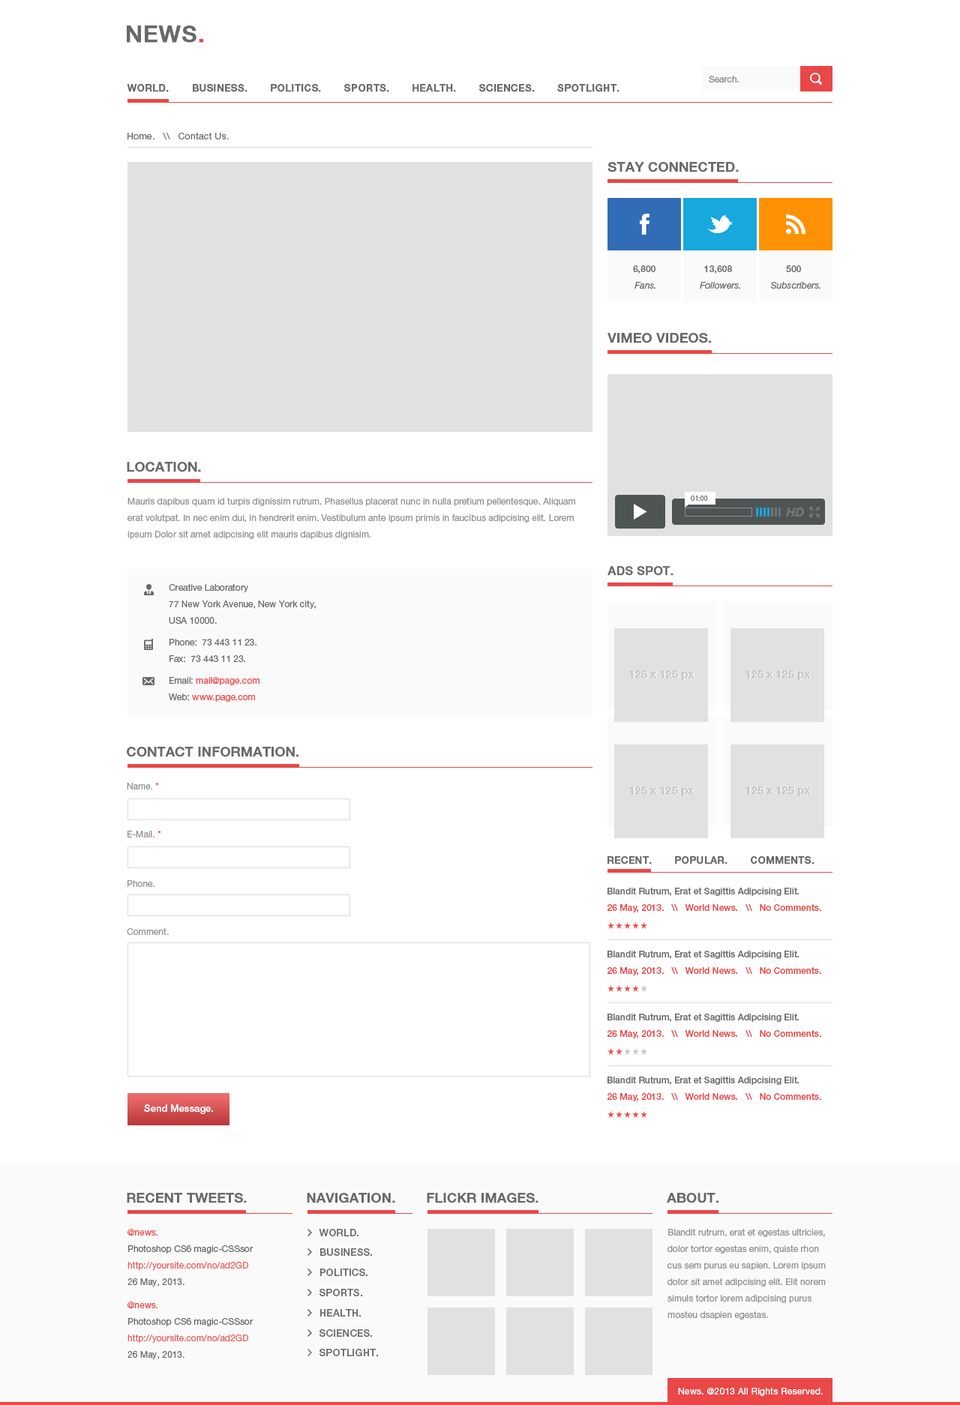
<style>
.page{position:relative;width:960px;height:1405px;background:#ffffff}
.page>*{position:absolute;margin:0}
.t1{font:22.5px "HelveticaNeueLTStd-Md";letter-spacing:0.025em;color:#696969;text-transform:uppercase;font-weight:bold}
.t2{font:22.5px "HelveticaNeueLTStd-Md";letter-spacing:0.025em;color:#ea4748;text-transform:uppercase;font-weight:bold}
.t3{font:9px "HelveticaNeueLTStd-Roman";color:#898989}
.t4{font:9.7px "HelveticaNeueLTStd-Md";letter-spacing:0.025em;color:#696969;text-transform:uppercase;font-weight:bold}
.t5{font:9px "HelveticaNeueLTStd-Roman";letter-spacing:0.025em;color:#696969}
.t6{font:13.5px "HelveticaNeueLTStd-Md";color:#696969;text-transform:uppercase;font-weight:bold}
.t7{font:9px/16.5px "HelveticaNeueLTStd-Md";color:#696969}
.t8{font:9px/16.5px "HelveticaNeueLTStd-It";color:#696969}
.t9{font:9px/16.5px "HelveticaNeueLTStd-Roman";color:#929292}
.t10{font:7.5px "MyriadPro-Regular";color:#696969}
.t11{font:12.3px "HelveticaNeueCyr-HeavyItalic";color:#6f7474}
.t12{font:12px "HelveticaNeueLTStd-Md";color:#696969;text-transform:uppercase;font-weight:bold}
.t13{font:9px/16.5px "HelveticaNeueLTStd-Roman";color:#696969}
.t14{font:9px/16.5px "HelveticaNeueLTStd-Roman";color:#ea4748}
.t15{font:10.5px "HelveticaNeueLTStd-Md";color:#d7d7d7;font-weight:bold}
.t16{font:9px "HelveticaNeueLTStd-Roman";color:#929292}
.t17{font:9px "HelveticaNeueLTStd-Roman";color:#ea4748}
.t18{font:9px "HelveticaNeueLTStd-Md";color:#696969}
.t19{font:9px "HelveticaNeueLTStd-Md";color:#ea4748}
.t20{font:9.7px "HelveticaNeueLTStd-Md";color:#ffffff}
.t21{font:9px/16.5px "HelveticaNeueLTStd-Roman";color:#ed5c5c}
.t22{font:9px/16.5px "HelveticaNeueLTStd-Roman";color:#686868}
.t23{font:9.7px/16.5px "HelveticaNeueLTStd-Md";letter-spacing:0.025em;color:#696969;text-transform:uppercase}
.t24{font:9px "HelveticaNeueLTStd-Roman";letter-spacing:0.025em;color:#ffffff}
</style>
<div class="page">
<p class="t1" style="left:127px;top:25px;width:76px;height:18px">News<span class="t2">.</span></p>
<p class="t3" style="left:709px;top:76px;width:30px;height:6px">Search.</p>
<p class="t4" style="left:127px;top:84px;width:492px;height:8px">World.       Business.       Politics.       Sports.       Health.       Sciences.       Spotlight.</p>
<p class="t5" style="left:127px;top:133px;width:102px;height:6px">Home.   \\   Contact Us.</p>
<p class="t6" style="left:607px;top:162px;width:132px;height:10px">Stay Connected.</p>
<p class="t7" style="left:633px;top:265px;width:22px;height:24px;text-align:center">6,800 <br><span class="t8">Fans.</span></p>
<p class="t8" style="left:700px;top:265px;width:40px;height:24px;text-align:center"><span class="t7">13,608  <br></span>Followers.</p>
<p class="t8" style="left:771px;top:265px;width:49px;height:24px;text-align:center"><span class="t7">500 <br> </span>Subscribers.</p>
<p class="t6" style="left:607px;top:333px;width:105px;height:10px">Vimeo Videos.</p>
<p class="t6" style="left:127px;top:462px;width:74px;height:10px">Location.</p>
<p class="t9" style="left:127px;top:498px;width:448px;height:41px">Mauris dapibus quam id turpis dignissim rutrum. Phasellus placerat nunc in nulla pretium pellentesque. Aliquam erat volutpat. In nec enim dui, in hendrerit enim. Vestibulum ante ipsum primis in faucibus adipcising elit. Lorem ipsum Dolor sit amet adipcising elit mauris dapibus dignisim.</p>
<p class="t10" style="left:691px;top:496px;width:17px;height:5px">01:00</p>
<p class="t11" style="left:786px;top:508px;width:18px;height:9px">HD</p>
<p class="t12" style="left:607px;top:566px;width:66px;height:10px">Ads Spot.</p>
<p class="t13" style="left:169px;top:584px;width:147px;height:40px">Creative Laboratory<br>77 New York Avenue, New York city, <br>USA 10000.</p>
<p class="t13" style="left:169px;top:639px;width:87px;height:23px">Phone:  73 443 11 23.<br>Fax:  73 443 11 23.<br>(+453) 445 11 24</p>
<p class="t14" style="left:169px;top:677px;width:90px;height:25px"><span class="t13">Email: </span>mail@page.com<br><span class="t13">Web: </span>www.page.com</p>
<p class="t15" style="left:629px;top:670px;width:65px;height:11px">125 x 125 px</p>
<p class="t15" style="left:745px;top:670px;width:66px;height:11px">125 x 125 px</p>
<p class="t6" style="left:127px;top:747px;width:172px;height:10px">Contact Information.</p>
<p class="t16" style="left:127px;top:783px;width:32px;height:7px">Name. <span class="t17">*</span></p>
<p class="t15" style="left:629px;top:787px;width:65px;height:10px">125 x 125 px</p>
<p class="t15" style="left:745px;top:787px;width:66px;height:10px">125 x 125 px</p>
<p class="t16" style="left:127px;top:831px;width:34px;height:7px">E-Mail. <span class="t17">*</span></p>
<p class="t4" style="left:607px;top:856px;width:207px;height:9px">Recent.       Popular.       Comments.</p>
<p class="t16" style="left:127px;top:880px;width:27px;height:7px">Phone.</p>
<p class="t18" style="left:607px;top:888px;width:192px;height:8px">Blandit Rutrum, Erat et Sagittis Adipcising Elit.</p>
<p class="t19" style="left:607px;top:904px;width:214px;height:9px">26 May, 2013.   \\   World News.   \\   No Comments.</p>
<p class="t16" style="left:127px;top:928px;width:42px;height:7px">Comment.</p>
<p class="t18" style="left:607px;top:951px;width:192px;height:8px">Blandit Rutrum, Erat et Sagittis Adipcising Elit.</p>
<p class="t19" style="left:607px;top:967px;width:214px;height:9px">26 May, 2013.   \\   World News.   \\   No Comments.</p>
<p class="t18" style="left:607px;top:1014px;width:192px;height:8px">Blandit Rutrum, Erat et Sagittis Adipcising Elit.</p>
<p class="t19" style="left:607px;top:1030px;width:214px;height:9px">26 May, 2013.   \\   World News.   \\   No Comments.</p>
<p class="t18" style="left:607px;top:1077px;width:192px;height:8px">Blandit Rutrum, Erat et Sagittis Adipcising Elit.</p>
<p class="t19" style="left:607px;top:1093px;width:214px;height:9px">26 May, 2013.   \\   World News.   \\   No Comments.</p>
<p class="t20" style="left:144px;top:1105px;width:69px;height:9px">Send Message.</p>
<p class="t6" style="left:127px;top:1193px;width:120px;height:11px">Recent Tweets.</p>
<p class="t6" style="left:307px;top:1193px;width:88px;height:11px">Navigation.</p>
<p class="t6" style="left:427px;top:1193px;width:111px;height:11px">Flickr Images.</p>
<p class="t6" style="left:667px;top:1193px;width:52px;height:11px">About.</p>
<p class="t21" style="left:127px;top:1229px;width:126px;height:58px"><span class="t14">@news.<br></span><span class="t22">Photoshop CS6 magic-CSSsor<br></span>http://yoursite.com/no/ad2GD<br><span class="t22">26 May, 2013.</span></p>
<p class="t23" style="left:319px;top:1229px;width:59px;height:128px">World.       <br>Business.       <br>Politics.       <br>Sports.       <br>Health.       <br>Sciences.       <br>Spotlight.</p>
<p class="t9" style="left:667px;top:1229px;width:159px;height:91px">Blandit rutrum, erat et egestas ultricies, dolor tortor egestas enim, quiste rhon cus sem purus eu sapien. Lorem ipsum<br>dolor sit amet adipcising elit. Elit norem simuls tortor lorem adipcising purus mosteu dsapien egestas.</p>
<p class="t21" style="left:127px;top:1302px;width:126px;height:58px"><span class="t14">@news.<br></span><span class="t22">Photoshop CS6 magic-CSSsor<br></span>http://yoursite.com/no/ad2GD<br><span class="t22">26 May, 2013.</span></p>
<p class="t24" style="left:678px;top:1388px;width:145px;height:8px">News. @2013 All Rights Reserved.</p>
</div>
